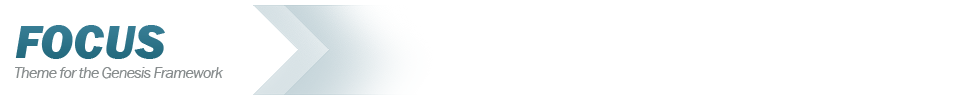
<style>
.page{position:relative;width:960px;height:100px;background:#ffffff}
.page>*{position:absolute;margin:0}
.t1{font:48px "FranklinGothic-HeavyItalic";color:#296d82;text-transform:uppercase}
.t2{font:16px "FranklinGothic-BookItalic";letter-spacing:-0.05em;color:#888d8e}
</style>
<div class="page">
<p class="t1" style="left:15px;top:25px;width:150px;height:34px">FOCUS</p>
<p class="t2" style="left:15px;top:67px;width:209px;height:12px">Theme for the Genesis Framework</p>
</div>
